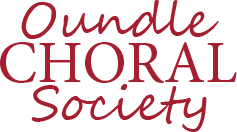
<style>
.page{position:relative;width:237px;height:132px;background:#ffffff}
.page>*{position:absolute;margin:0}
.t1{font:48px "SegoeScript";color:#a51f2f}
.t2{font:60px "MinionPro-Regular";color:#a51f2f}
</style>
<div class="page">
<p class="t1" style="left:21px;top:0px;width:198px;height:39px">Oundle</p>
<p class="t2" style="left:0px;top:42px;width:237px;height:41px">CHORAL</p>
<p class="t1" style="left:31px;top:84px;width:176px;height:48px">Society</p>
</div>
